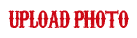
<style>
.page{position:relative;width:137px;height:38px;background:#ffffff}
.page>*{position:absolute;margin:0}
.t1{font:30px "CarnivaleeFreakshow";letter-spacing:-0.035em;color:#cc0814}
</style>
<div class="page">
<p class="t1" style="left:8px;top:9px;width:121px;height:19px">upload photo</p>
</div>
